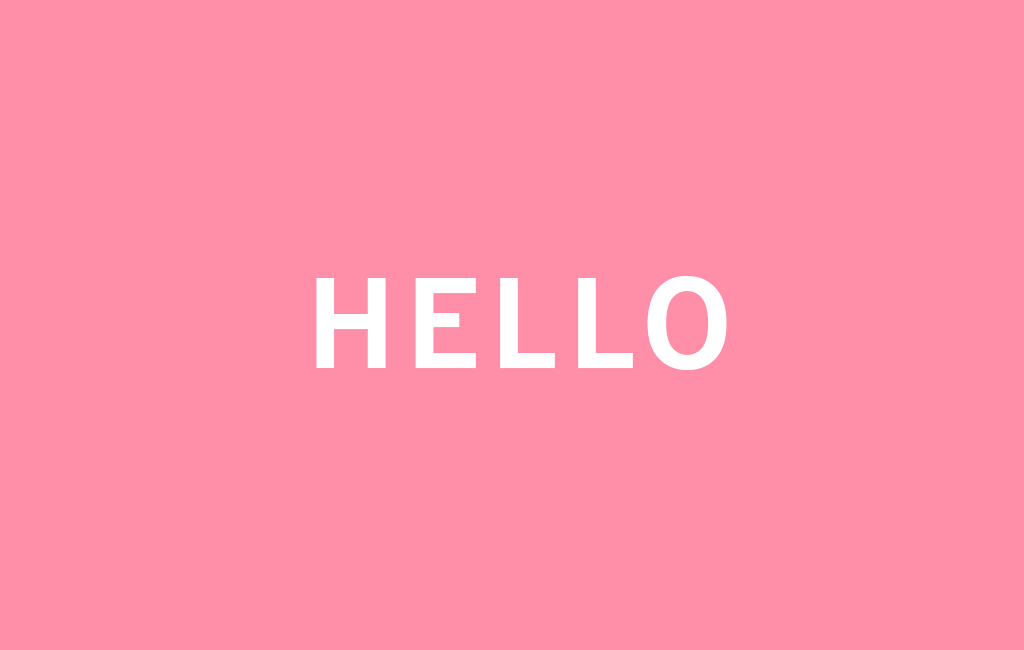
<style>
.page{position:relative;width:1024px;height:650px;background:#ff8ea9}
.page>*{position:absolute;margin:0}
.t1{font:120px "NewsGothicMT-Bold";letter-spacing:0.075em;color:#ffffff}
</style>
<div class="page">
<p class="t1" style="left:316px;top:276px;width:411px;height:94px">HELLO</p>
</div>
